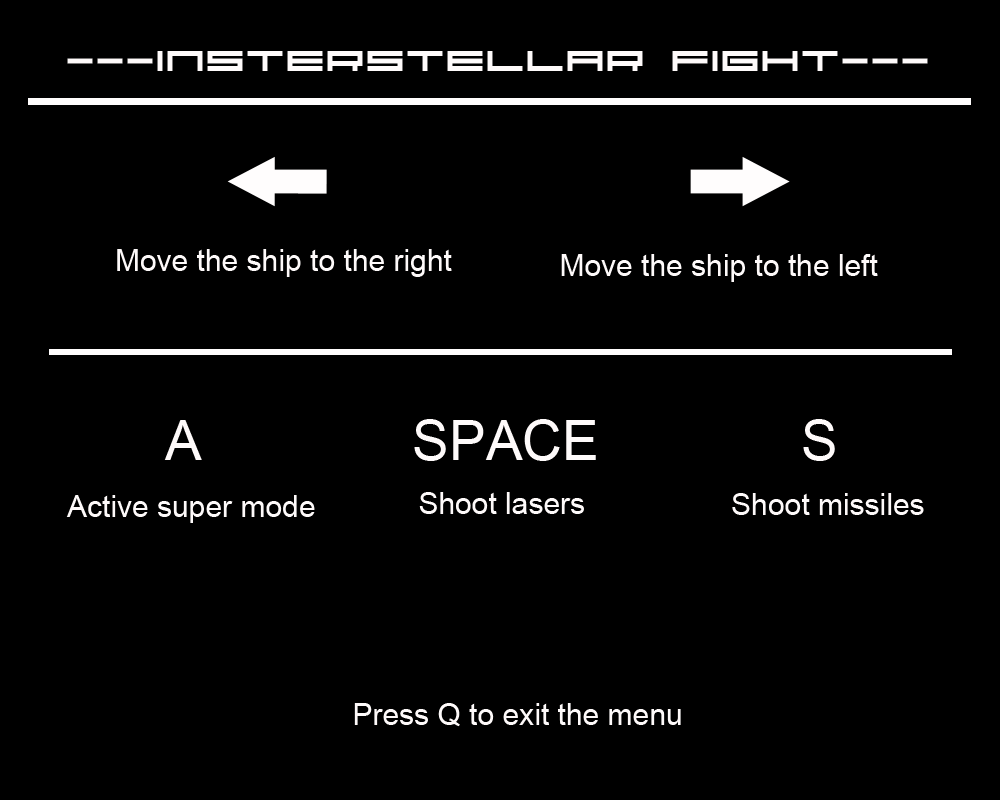
<style>
.page{position:relative;width:1000px;height:800px;background:#000000}
.page>*{position:absolute;margin:0}
.t1{font:30px "04b31";color:#fefafa}
.t2{font:30px "ArialMT";color:#fefafa}
.t3{font:55px "ArialMT";color:#fefafa}
</style>
<div class="page">
<p class="t1" style="left:67px;top:51px;width:861px;height:20px">---INSTERSTELLAR FIGHT---</p>
<p class="t2" style="left:117px;top:249px;width:335px;height:28px">Move the ship to the right</p>
<p class="t2" style="left:561px;top:254px;width:317px;height:28px">Move the ship to the left</p>
<p class="t3" style="left:164px;top:420px;width:38px;height:40px">A</p>
<p class="t3" style="left:414px;top:419px;width:182px;height:42px">SPACE</p>
<p class="t3" style="left:803px;top:419px;width:32px;height:42px">S</p>
<p class="t2" style="left:66px;top:495px;width:249px;height:28px">Active super mode</p>
<p class="t2" style="left:419px;top:492px;width:165px;height:22px">Shoot lasers</p>
<p class="t2" style="left:732px;top:493px;width:192px;height:22px">Shoot missiles</p>
<p class="t2" style="left:354px;top:703px;width:327px;height:24px">Press Q to exit the menu</p>
</div>
